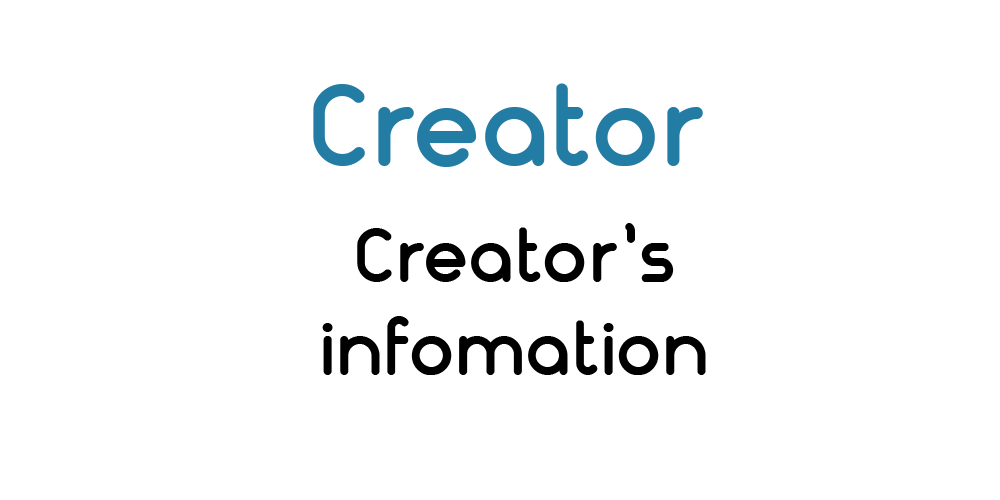
<style>
.page{position:relative;width:1000px;height:500px;background:#ffffff}
.page>*{position:absolute;margin:0}
.t1{font:116.7px "FS-Nokio-Bold";color:#237ca3}
.t2{font:77.8px "FS-Nokio-Bold";color:#000000}
</style>
<div class="page">
<p class="t1" style="left:313px;top:83px;width:390px;height:84px">Creator</p>
<p class="t2" style="left:322px;top:223px;width:384px;height:152px;text-align:center">Creator’s<br>infomation</p>
</div>
